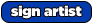
<style>
.page{position:relative;width:95px;height:24px;background:#033bad}
.page>*{position:absolute;margin:0}
.t1{font:14px "Gotham-Ultra";letter-spacing:-0.01em;color:#ffffff}
</style>
<div class="page">
<p class="t1" style="left:11px;top:5px;width:71px;height:14px">sign artist</p>
</div>
